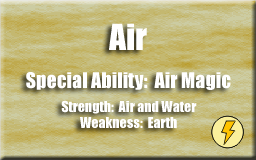
<style>
.page{position:relative;width:256px;height:160px}
.page>*{position:absolute;margin:0}
.t1{font:33.3px "Impact";color:#ffffff}
.t2{font:20px "Impact";color:#ffffff}
.t3{font:14px "Impact";color:#ffffff}
</style>
<div class="page">
<p class="t1" style="left:109px;top:23px;width:38px;height:27px">Air</p>
<p class="t2" style="left:26px;top:72px;width:205px;height:18px">Special Ability:  Air Magic</p>
<p class="t3" style="left:61px;top:100px;width:136px;height:14px">Strength:  Air and Water</p>
<p class="t3" style="left:80px;top:117px;width:97px;height:11px">Weakness:  Earth</p>
</div>
